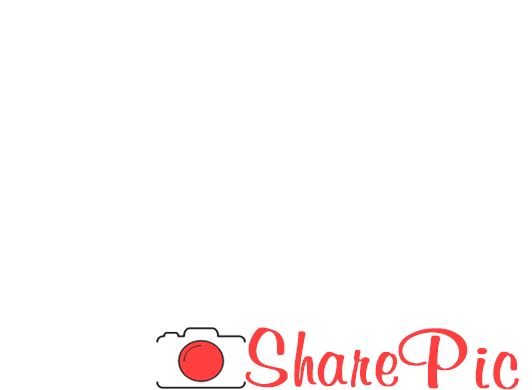
<style>
.page{position:relative;width:532px;height:390px;background:#ffffff}
.page>*{position:absolute;margin:0}
.t1{font:76.4px "VNI-Murray-Bold";letter-spacing:0.007em;color:#fd3f3f;font-weight:bold;scale:1.03 1}
.t2{font:79.2px "VNI-Murray-Bold";letter-spacing:0.007em;color:#fd3f3f;font-weight:bold;scale:1.09 1}
</style>
<div class="page">
<p class="t1" style="left:245px;top:327px;width:154px;height:61px">Share</p>
<p class="t2" style="left:398px;top:328px;width:121px;height:62px">Pic</p>
</div>
